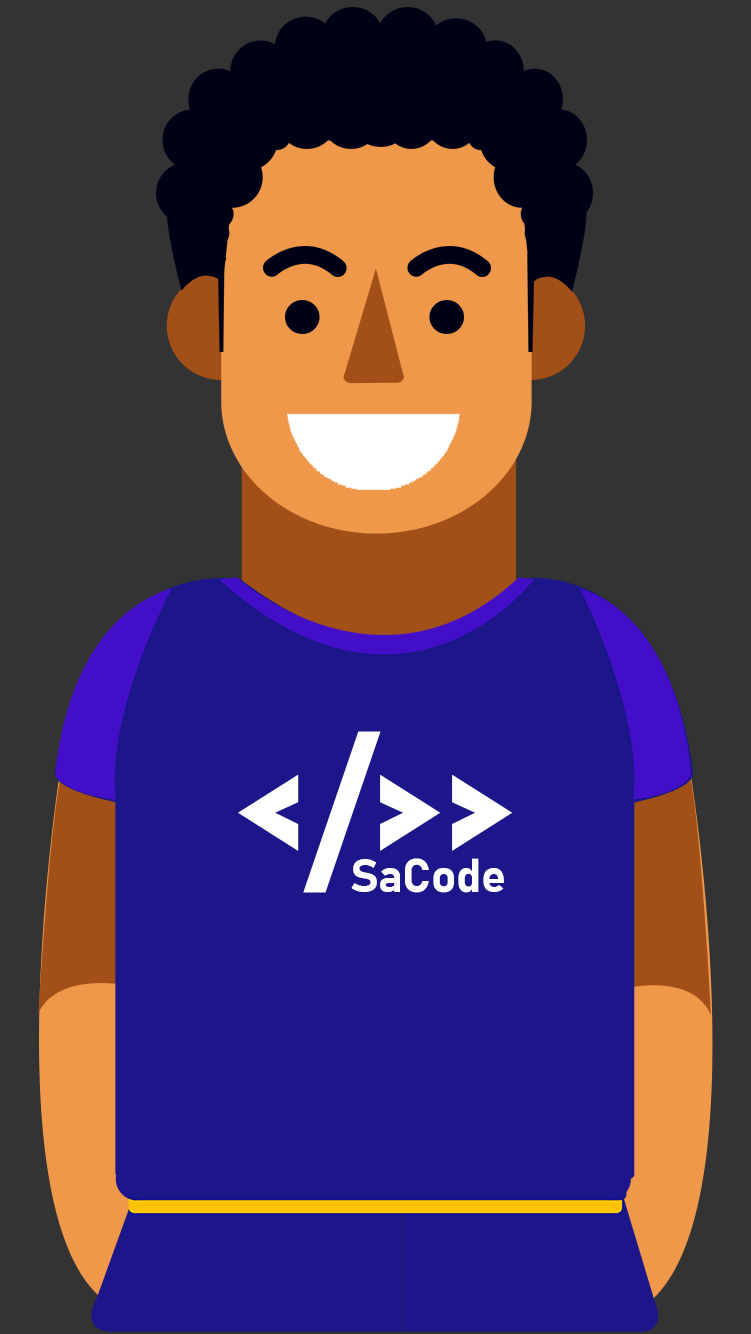
<style>
.page{position:relative;width:751px;height:1334px;background:#1c168a}
.page>*{position:absolute;margin:0}
.t1{font:173.3px "Bahnschrift-Bold";letter-spacing:-0.01em;color:#ffffff}
.t2{font:46.7px "Bahnschrift-Bold";letter-spacing:-0.01em;color:#ffffff}
</style>
<div class="page">
<p class="t1" style="left:238px;top:731px;width:275px;height:162px">&lt;/&gt;&gt;</p>
<p class="t2" style="left:351px;top:858px;width:153px;height:35px">SaCode</p>
</div>
